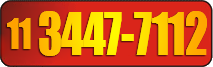
<style>
.page{position:relative;width:213px;height:67px;background:#da251a}
.page>*{position:absolute;margin:0}
.t1{font:54px "Impact";letter-spacing:-0.025em;scale:0.86 1}
.t2{font:38.9px "Impact";letter-spacing:-0.025em;color:#ffa400;scale:0.85 1}
</style>
<div class="page">
<p class="t1" style="left:39px;top:11px;width:168px;height:45px">3447-7112</p>
<p class="t2" style="left:7px;top:18px;width:24px;height:31px">11</p>
</div>
